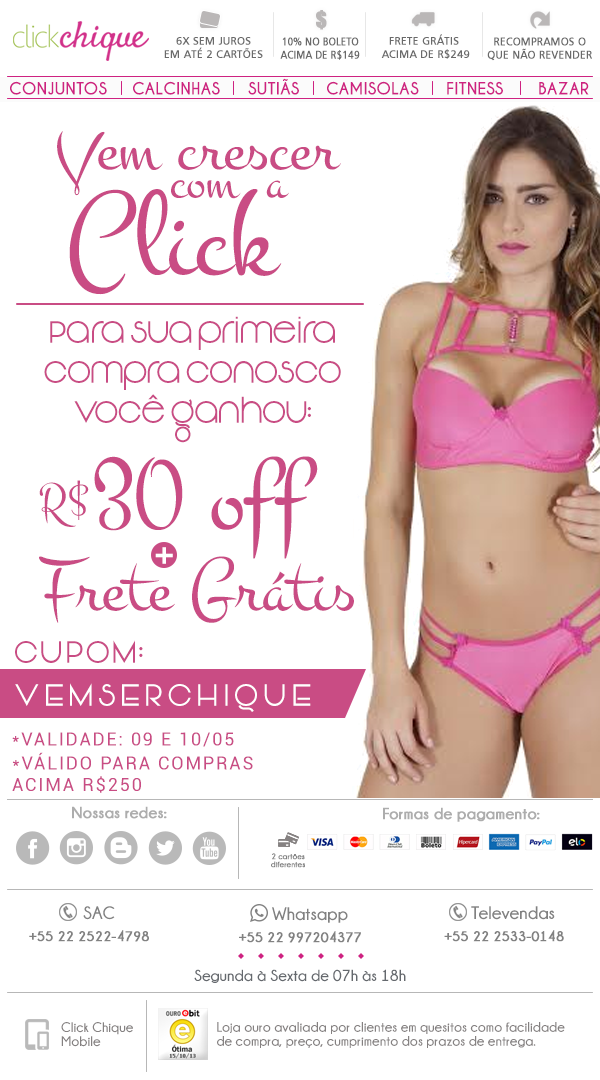
<style>
.page{position:relative;width:600px;height:1080px;background:#ffffff}
.page>*{position:absolute;margin:0}
.t1{font:20.8px "Impact";color:#bab7b7;text-transform:uppercase;font-weight:bold}
.t2{font:11px "Humanist777BT-RomanB";color:#6a6a6a;text-transform:uppercase;font-weight:bold}
.t3{font:11px "Humanist777BT-RomanB";color:#6a6a6a;text-transform:uppercase;font-weight:bold;scale:0.88 1}
.t4{font:16px "CaviarDreams-Bold";color:#ce2281;text-transform:uppercase}
.t5{font:74.1px "Montez-Regular";color:#c94c84}
.t6{font:58px "Montez-Regular";color:#c94c84}
.t7{font:123.2px "Montez-Regular";color:#c94c84}
.t8{font:30px/40px "Vonique92";color:#c94c84}
.t9{font:108.2px "Montez-Regular";color:#c94c84}
.t10{font:48px "Montez-Regular";color:#c94c84}
.t11{font:78.8px "Montez-Regular";color:#c94c84}
.t12{font:48.5px "OpificioNeue";color:#ffffff}
.t13{font:30px "Vonique92";letter-spacing:0.1em;color:#c94c84;text-transform:uppercase}
.t14{font:30px "Vonique92";letter-spacing:0.2em;color:#ffffff;text-transform:uppercase}
.t15{font:18px "Roboto-Regular";letter-spacing:0.1em;color:#c94c84;text-transform:uppercase}
.t16{font:16px "Champagne&Limousines-Bold";color:#adadad;font-weight:bold}
.t17{font:8px/8px "Champagne&Limousines-Bold";color:#818181;font-weight:bold}
.t18{font:18px "Champagne&Limousines-Bold";color:#818181}
.t19{font:14px "Champagne&Limousines-Bold";color:#818181;text-transform:uppercase;font-weight:bold}
.t20{font:16px "Champagne&Limousines-Bold";color:#65696e}
.t21{font:14px/14px "Champagne&Limousines-Bold";color:#858181}
</style>
<div class="page">
<p class="t1" style="left:316px;top:10px;width:11px;height:20px">$</p>
<p class="t2" style="left:164px;top:37px;width:99px;height:21px;text-align:center">6x sem juros<br>em até 2 cartões</p>
<p class="t3" style="left:280px;top:37px;width:80px;height:23px;text-align:center">10% no boleto<br>acima de R$149</p>
<p class="t2" style="left:381px;top:34px;width:89px;height:25px;text-align:center">frete grátis <br>acima de R$249</p>
<p class="t2" style="left:487px;top:37px;width:105px;height:24px;text-align:center">recompramos o<br>que não revender</p>
<p class="t4" style="left:248px;top:78px;width:51px;height:17px">Sutiãs</p>
<p class="t4" style="left:10px;top:81px;width:97px;height:14px">Conjuntos</p>
<p class="t4" style="left:133px;top:81px;width:87px;height:14px">Calcinhas</p>
<p class="t4" style="left:327px;top:81px;width:92px;height:14px">Camisolas</p>
<p class="t4" style="left:447px;top:81px;width:56px;height:14px">fitness</p>
<p class="t4" style="left:539px;top:82px;width:50px;height:13px">Bazar</p>
<p class="t5" style="left:57px;top:131px;width:284px;height:65px">Vem crescer</p>
<p class="t6" style="left:171px;top:180px;width:118px;height:19px">com  a</p>
<p class="t7" style="left:69px;top:189px;width:213px;height:106px">Click</p>
<p class="t8" style="left:44px;top:316px;width:297px;height:127px;text-align:center">Para sua primeira<br>compra conosco<br>você ganhou:</p>
<p class="t9" style="left:94px;top:456px;width:224px;height:103px">30 off</p>
<p class="t10" style="left:39px;top:480px;width:50px;height:47px">R$</p>
<p class="t11" style="left:39px;top:556px;width:315px;height:67px">Frete Grátis</p>
<p class="t12" style="left:155px;top:547px;width:18px;height:17px">+</p>
<p class="t13" style="left:15px;top:640px;width:128px;height:23px">cupom:</p>
<p class="t14" style="left:15px;top:683px;width:296px;height:29px">VEMSERCHIQUE</p>
<p class="t15" style="left:12px;top:732px;width:222px;height:15px">*Validade: 09 e 10/05</p>
<p class="t15" style="left:12px;top:752px;width:241px;height:41px">*válido para compras<br>acima R$250</p>
<p class="t16" style="left:72px;top:806px;width:95px;height:13px">Nossas redes:</p>
<p class="t16" style="left:383px;top:807px;width:157px;height:15px">Formas de pagamento:</p>
<p class="t17" style="left:271px;top:853px;width:34px;height:15px;text-align:center">2 cartões<br>diferentes</p>
<p class="t18" style="left:83px;top:906px;width:32px;height:14px">SAC</p>
<p class="t18" style="left:272px;top:907px;width:76px;height:16px">Whatsapp</p>
<p class="t18" style="left:471px;top:906px;width:84px;height:14px">Televendas</p>
<p class="t19" style="left:29px;top:930px;width:120px;height:12px">+55 22 2522-4798</p>
<p class="t19" style="left:239px;top:931px;width:122px;height:12px">+55 22 997204377</p>
<p class="t19" style="left:444px;top:930px;width:120px;height:12px">+55 22 2533-0148</p>
<p class="t20" style="left:194px;top:969px;width:212px;height:14px">Segunda à Sexta de 07h às 18h</p>
<p class="t21" style="left:61px;top:1022px;width:72px;height:25px">Click Chique<br>Mobile</p>
<p class="t21" style="left:217px;top:1022px;width:348px;height:26px">Loja ouro avaliada por clientes em quesitos como facilidade de compra, preço, cumprimento dos prazos de entrega.</p>
</div>
